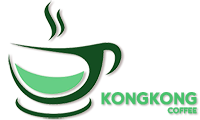
<style>
.page{position:relative;width:200px;height:120px;background:#ffffff}
.page>*{position:absolute;margin:0}
.t1{font:14px "FashionFetishHeavy";letter-spacing:-0.05em;color:#47c16b;font-weight:bold}
.t2{font:6.5px "FashionFetishHeavy";letter-spacing:-0.05em;color:#47c16b;font-weight:bold}
</style>
<div class="page">
<p class="t1" style="left:101px;top:92px;width:96px;height:13px">KONGKONG</p>
<p class="t2" style="left:167px;top:107px;width:30px;height:7px">COFFEE</p>
</div>
